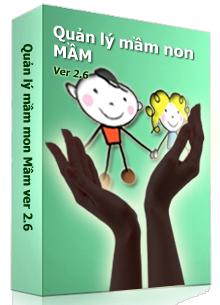
<style>
.page{position:relative;width:220px;height:305px}
.page>*{position:absolute;margin:0}
.t1{font:12px "Tahoma-Bold";color:#003300}
.t2{font:10px "Tahoma-Bold";color:#003300}
</style>
<div class="page">
<p class="t1" style="left:21px;top:44px;width:13px;height:187px;rotate:90deg">Quản lý mầm mon Mầm ver 2.6</p>
<p class="t2" style="left:53px;top:66px;width:36px;height:13px;rotate:9deg">Ver 2.6</p>
</div>
